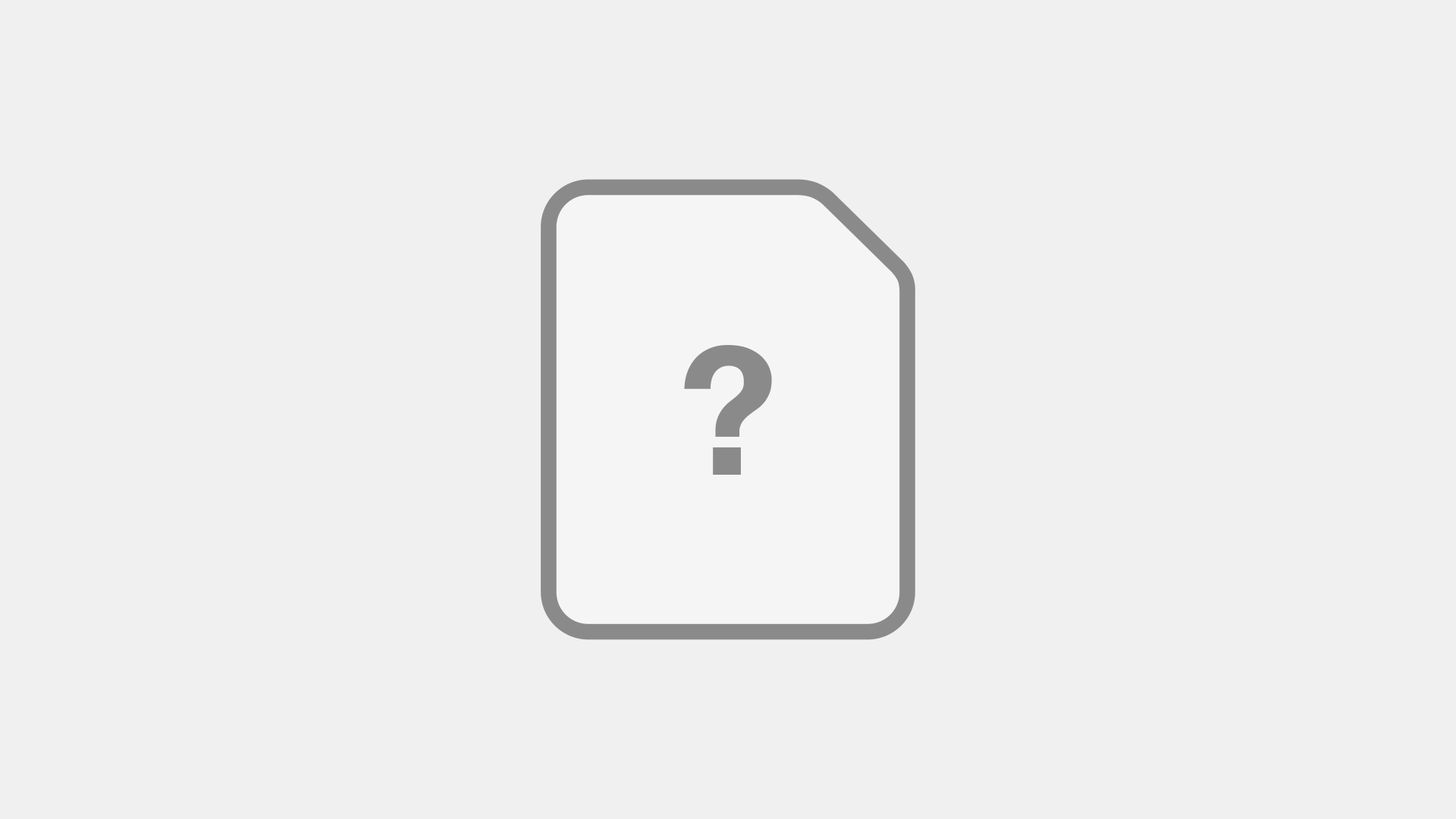
<style>
.page{position:relative;width:1456px;height:819px;background:#f0f0f0}
.page>*{position:absolute;margin:0}
.t1{font:177.4px "HelveticaNeue-Bold";color:#8a8a8a}
</style>
<div class="page">
<p class="t1" style="left:684px;top:344px;width:88px;height:131px">?</p>
</div>
